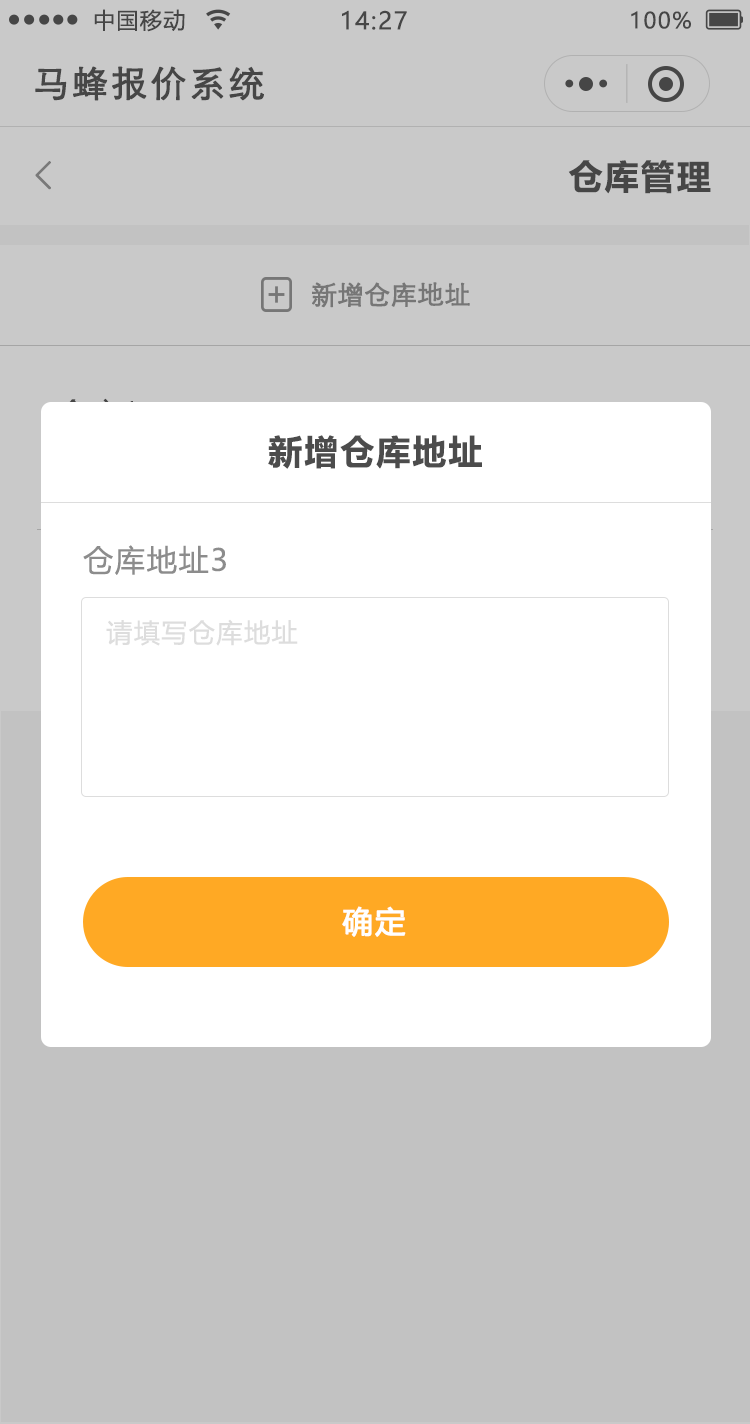
<style>
.page{position:relative;width:750px;height:1424px;background:#ffffff}
.page>*{position:absolute;margin:0}
.t1{font:22px "MicrosoftYaHei";letter-spacing:0.06em;color:#444444}
.t2{font:24px "MicrosoftYaHei";letter-spacing:0.06em;color:#444444}
.t3{font:36px "STXihei";letter-spacing:0.06em;color:#444444;font-weight:bold}
.t4{font:39.2px "FangSong";letter-spacing:0.1em;color:#8c8c8c;font-weight:bold}
.t5{font:34px "MicrosoftYaHeiUI-Bold";letter-spacing:0.06em;color:#444444}
.t6{font:26px "STXihei";color:#888888;font-weight:bold}
.t7{font:34px "MicrosoftYaHeiUI-Bold";letter-spacing:0.06em;color:#4c4c4c}
.t8{font:30px "MicrosoftYaHeiUI";letter-spacing:0.06em;color:#8c8c8c}
.t9{font:26px "MicrosoftYaHeiUI";letter-spacing:0.06em;color:#dddddd}
.t10{font:30px "MicrosoftYaHeiUI";letter-spacing:0.06em;color:#ffffff;font-weight:bold}
</style>
<div class="page">
<p class="t1" style="left:94px;top:9px;width:91px;height:23px">中国移动</p>
<p class="t2" style="left:342px;top:10px;width:65px;height:20px">14:27</p>
<p class="t1" style="left:631px;top:11px;width:60px;height:18px">100%</p>
<p class="t3" style="left:35px;top:66px;width:229px;height:35px">马蜂报价系统</p>
<p class="t4" style="left:35px;top:161px;width:16px;height:29px">&lt;</p>
<p class="t5" style="left:568px;top:160px;width:143px;height:34px">仓库管理</p>
<p class="t6" style="left:312px;top:282px;width:158px;height:26px">新增仓库地址</p>
<p class="t7" style="left:268px;top:435px;width:214px;height:34px">新增仓库地址</p>
<p class="t8" style="left:83px;top:545px;width:143px;height:30px">仓库地址3</p>
<p class="t9" style="left:106px;top:619px;width:192px;height:27px">请填写仓库地址</p>
<p class="t10" style="left:342px;top:906px;width:64px;height:31px">确定</p>
</div>
